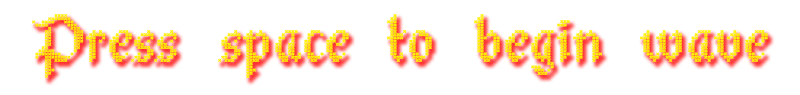
<style>
.page{position:relative;width:800px;height:95px;background:#ffffff}
.page>*{position:absolute;margin:0}
.t1{font:66.7px "StitchWarrior";color:#ffef00}
</style>
<div class="page">
<p class="t1" style="left:32px;top:14px;width:736px;height:64px">Press space to begin wave</p>
</div>
